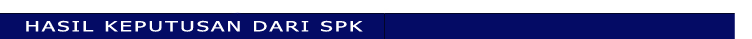
<style>
.page{position:relative;width:752px;height:39px;background:#040b65}
.page>*{position:absolute;margin:0}
.t1{font:14px "Tahoma";letter-spacing:0.1em;color:#ffffff;scale:1.57 1}
</style>
<div class="page">
<p class="t1" style="left:26px;top:20px;width:337px;height:12px">HASIL KEPUTUSAN DARI SPK</p>
</div>
